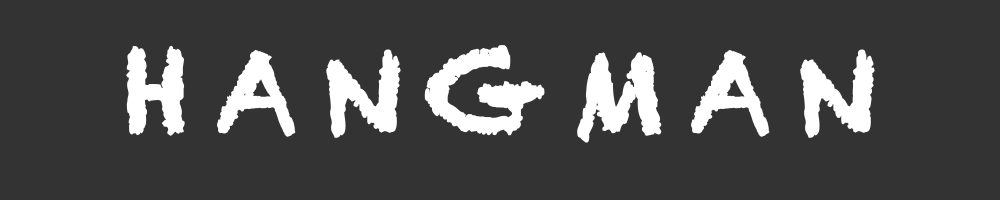
<style>
.page{position:relative;width:1000px;height:200px;background:#333333}
.page>*{position:absolute;margin:0}
.t1{font:110px "Chalkduster";letter-spacing:0.2em;color:#ffffff;font-weight:bold}
</style>
<div class="page">
<p class="t1" style="left:126px;top:45px;width:749px;height:98px">HANGMAN</p>
</div>
